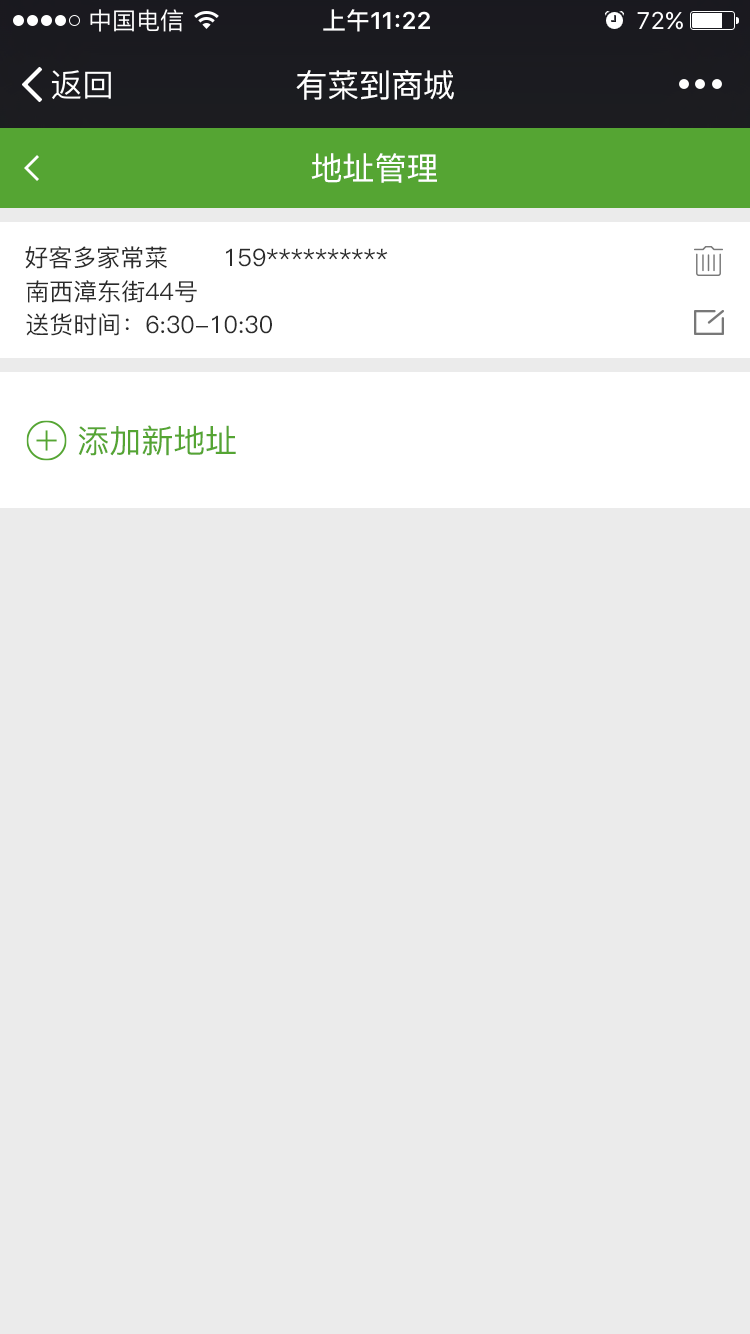
<style>
.page{position:relative;width:750px;height:1334px;background:#ebebeb}
.page>*{position:absolute;margin:0}
.t1{font:32px "PingFang-SC-Medium";color:#ffffff}
.t2{font:24px "PingFang-SC-Medium";color:#2b2b2b}
.t3{font:32px "PingFang-SC-Medium";color:#55a533}
</style>
<div class="page">
<p class="t1" style="left:296px;top:70px;width:158px;height:30px">有菜到商城</p>
<p class="t1" style="left:311px;top:153px;width:126px;height:30px">地址管理</p>
<p class="t2" style="left:25px;top:246px;width:142px;height:23px">好客多家常菜</p>
<p class="t2" style="left:226px;top:248px;width:162px;height:19px">159**********</p>
<p class="t2" style="left:26px;top:280px;width:171px;height:23px">南西漳东街44号</p>
<p class="t2" style="left:26px;top:313px;width:246px;height:23px">送货时间：6:30-10:30</p>
<p class="t3" style="left:78px;top:425px;width:158px;height:31px">添加新地址</p>
</div>
